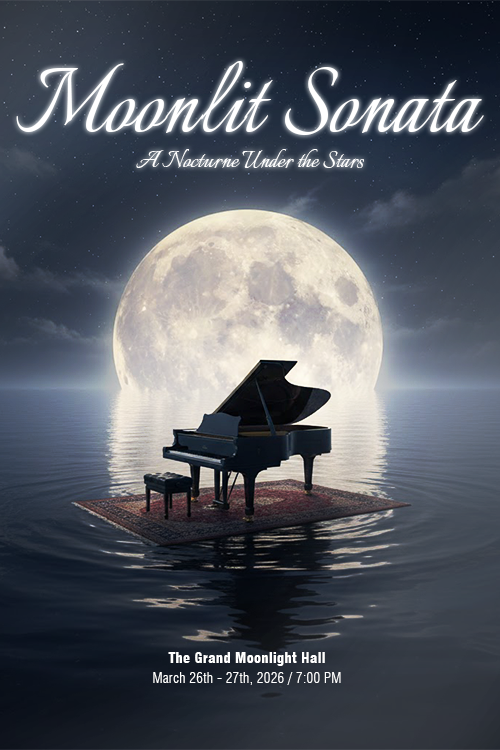
<style>
.page{position:relative;width:500px;height:750px}
.page>*{position:absolute;margin:0}
.t1{font:114px "Italianno-Regular";color:#ffffff;scale:0.94 1}
.t2{font:30px "Italianno-Regular";color:#ffffff;scale:0.94 1}
.t3{font:15px "Swiss721BT-BlackCondensed";letter-spacing:0.022em;color:#ffffff;scale:0.94 1}
.t4{font:15px "Swiss721BT-LightCondensed";letter-spacing:0.022em;color:#ffffff;scale:0.94 1}
</style>
<div class="page">
<p class="t1" style="left:16px;top:61px;width:468px;height:74px">Moonlit Sonata</p>
<p class="t2" style="left:136px;top:149px;width:228px;height:19px">A Nocturne Under the Stars</p>
<p class="t3" style="left:168px;top:652px;width:157px;height:14px">The Grand Moonlight Hall</p>
<p class="t4" style="left:153px;top:672px;width:188px;height:13px">March 26th - 27th, 2026 / 7:00 PM</p>
</div>
